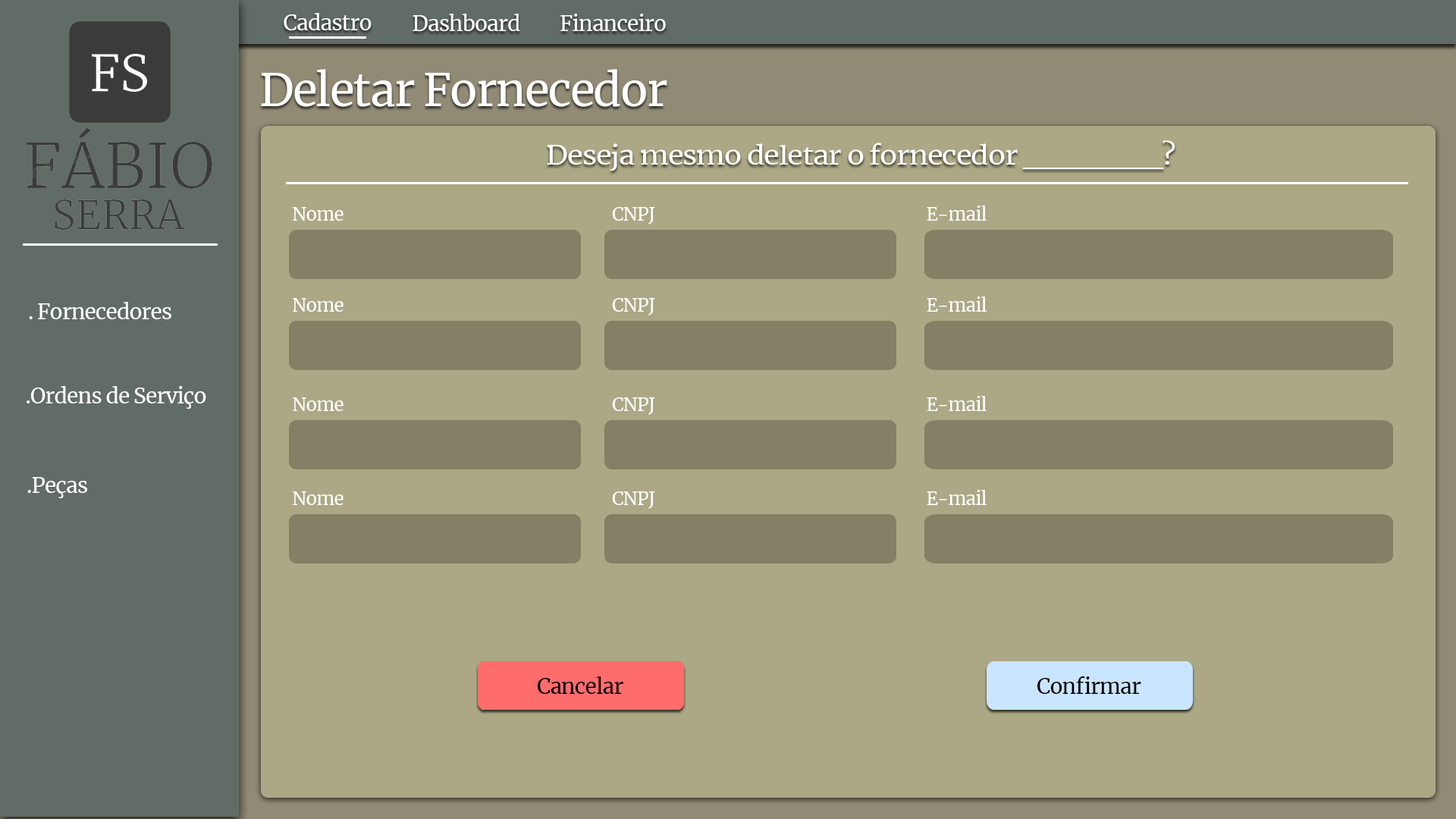
<style>
.page{position:relative;width:1456px;height:819px;background:#aca885}
.page>*{position:absolute;margin:0}
.t1{font:21.2px "Merriweather-Regular";letter-spacing:-0.03em;color:#ffffff}
.t2{font:45.5px "Merriweather-Regular";letter-spacing:-0.03em;color:#ffffff}
.t3{font:25.9px "Merriweather-Regular";letter-spacing:-0.03em;color:#ffffff;scale:1.11 1}
.t4{font:18.2px "Merriweather-Regular";letter-spacing:-0.03em;color:#ffffff}
.t5{font:21.2px "Merriweather-Regular";letter-spacing:-0.03em;color:#000000}
</style>
<div class="page">
<p class="t1" style="left:284px;top:13px;width:88px;height:17px">Cadastro</p>
<p class="t1" style="left:413px;top:14px;width:107px;height:17px">Dashboard</p>
<p class="t1" style="left:560px;top:14px;width:106px;height:17px">Financeiro</p>
<p class="t2" style="left:261px;top:69px;width:406px;height:38px">Deletar Fornecedor</p>
<p class="t3" style="left:547px;top:140px;width:628px;height:31px">Deseja mesmo deletar o fornecedor ______?</p>
<p class="t4" style="left:293px;top:207px;width:51px;height:14px">Nome</p>
<p class="t4" style="left:612px;top:207px;width:43px;height:17px">CNPJ</p>
<p class="t4" style="left:927px;top:206px;width:60px;height:15px">E-mail</p>
<p class="t1" style="left:29px;top:302px;width:142px;height:17px">. Fornecedores</p>
<p class="t4" style="left:293px;top:298px;width:51px;height:14px">Nome</p>
<p class="t4" style="left:612px;top:298px;width:43px;height:17px">CNPJ</p>
<p class="t4" style="left:927px;top:297px;width:60px;height:15px">E-mail</p>
<p class="t1" style="left:27px;top:386px;width:179px;height:23px">.Ordens de Serviço</p>
<p class="t4" style="left:293px;top:397px;width:51px;height:14px">Nome</p>
<p class="t4" style="left:612px;top:397px;width:43px;height:18px">CNPJ</p>
<p class="t4" style="left:927px;top:396px;width:60px;height:15px">E-mail</p>
<p class="t1" style="left:27px;top:477px;width:60px;height:21px">.Peças</p>
<p class="t4" style="left:293px;top:491px;width:51px;height:14px">Nome</p>
<p class="t4" style="left:612px;top:491px;width:43px;height:18px">CNPJ</p>
<p class="t4" style="left:927px;top:490px;width:60px;height:15px">E-mail</p>
<p class="t5" style="left:537px;top:676px;width:86px;height:18px">Cancelar</p>
<p class="t5" style="left:1037px;top:676px;width:104px;height:18px">Confirmar</p>
</div>
